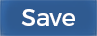
<style>
.page{position:relative;width:97px;height:36px;background:#2f5a90}
.page>*{position:absolute;margin:0}
.t1{font:24px "Montserrat-Regular";color:#ffffff}
</style>
<div class="page">
<p class="t1" style="left:21px;top:9px;width:54px;height:17px">Save</p>
</div>
